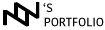
<style>
.page{position:relative;width:105px;height:30px;background:#ffffff}
.page>*{position:absolute;margin:0}
.t1{font:12.1px "KohinoorDevanagari-Medium";color:#000000;text-transform:uppercase}
</style>
<div class="page">
<p class="t1" style="left:43px;top:3px;width:10px;height:9px">‘s</p>
<p class="t1" style="left:44px;top:17px;width:60px;height:10px">Portfolio</p>
</div>
